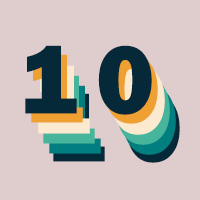
<style>
.page{position:relative;width:200px;height:200px;background:#dfcdcd}
.page>*{position:absolute;margin:0}
.t1{font:100px "FranklinGothic-Heavy";letter-spacing:0.19em;color:#052939}
.t2{font:100px "FranklinGothic-Heavy";letter-spacing:0.19em}
</style>
<div class="page">
<p class="t1" style="left:25px;top:45px;width:127px;height:70px">10</p>
<p class="t2" style="left:31px;top:54px;width:127px;height:70px">10</p>
<p class="t2" style="left:53px;top:93px;width:127px;height:70px">10</p>
</div>
